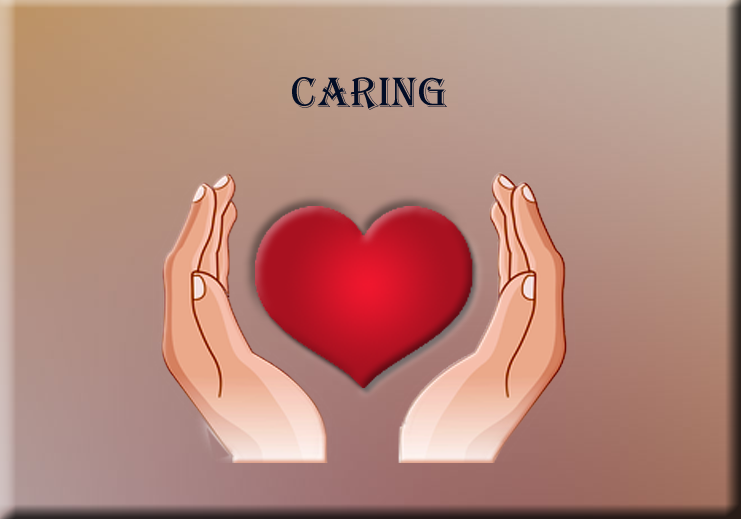
<style>
.page{position:relative;width:741px;height:519px}
.page>*{position:absolute;margin:0}
.t1{font:44px "Algerian";color:#020d26}
</style>
<div class="page">
<p class="t1" style="left:292px;top:77px;width:155px;height:33px">Caring</p>
</div>
